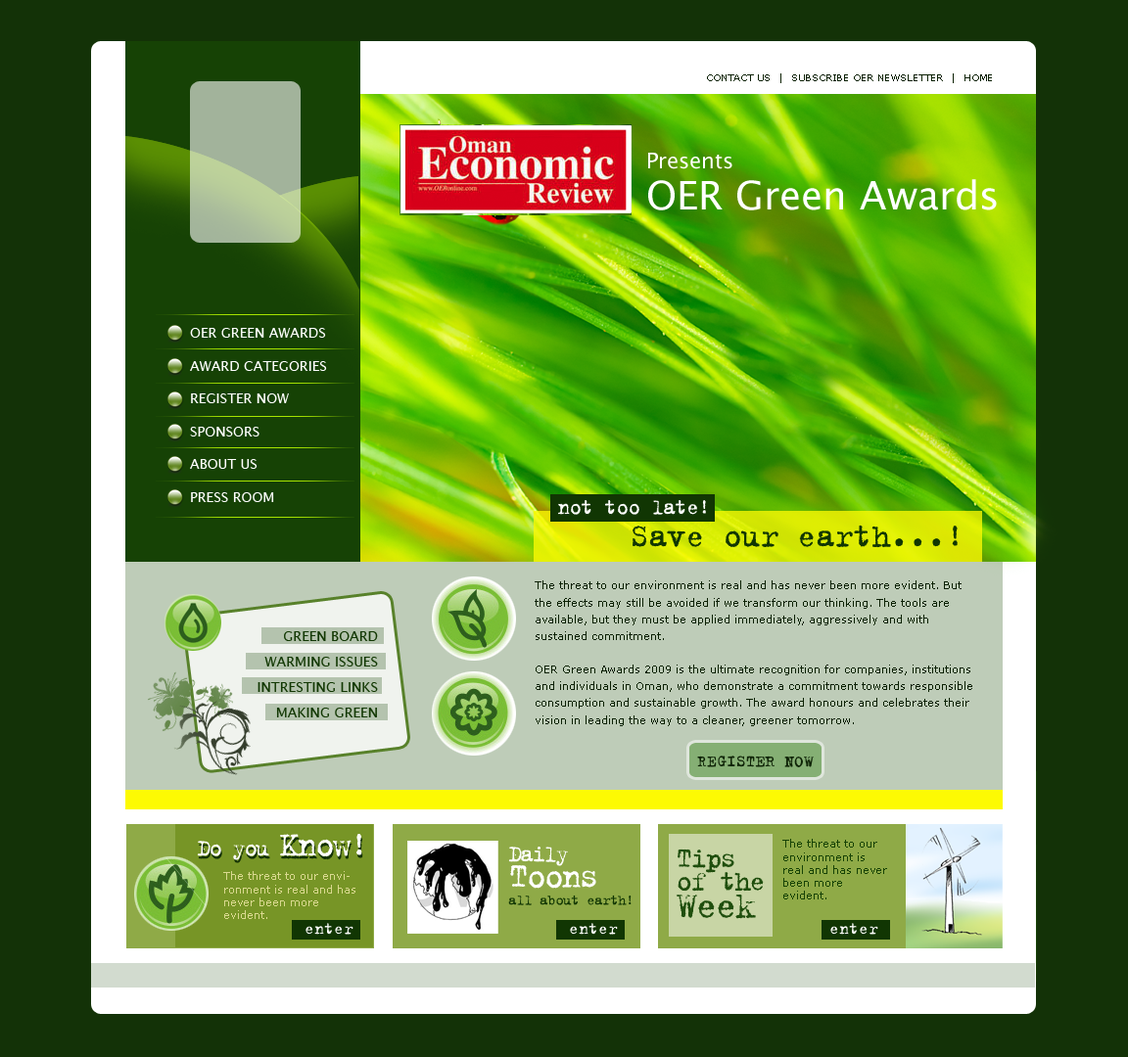
<style>
.page{position:relative;width:1128px;height:1057px;background:#133207}
.page>*{position:absolute;margin:0}
.t1{font:9.8px "Verdana";color:#0b2003}
.t2{font:39.2px/41.1px "LucidaSans";color:#ffffff}
.t3{font:21.5px/17.8px "LucidaSans";color:#ffffff}
.t4{font:13.7px "LucidaSans";color:#ffffff}
.t5{font:23.5px "Trixie-Plain";letter-spacing:-0.05em;color:#ffffff}
.t6{font:35.2px "Trixie-Plain";letter-spacing:-0.025em;color:#113603}
.t7{font:10.8px/16.8px "Verdana";color:#0b2003}
.t8{font:13.7px/25.5px "LucidaSans";color:#123803}
.t9{font:17.6px "Trixie-Plain";color:#0f2407}
.t10{font:25.5px "Trixie-Plain";letter-spacing:-0.075em;color:#ffffff}
.t11{font:37.2px "Trixie-Plain";letter-spacing:-0.075em;color:#ffffff}
.t12{font:10.8px "Verdana";color:#164205}
.t13{font:15.7px/17.8px "Trixie-Plain";letter-spacing:-0.075em;color:#113603}
.t14{font:25.5px/17.8px "Trixie-Plain";letter-spacing:-0.075em;color:#ffffff}
.t15{font:37.2px/25.6px "Trixie-Plain";letter-spacing:-0.075em;color:#ffffff}
.t16{font:30.3px/22.7px "Trixie-Plain";letter-spacing:-0.075em;color:#1f4e0d}
.t17{font:30.3px/17.8px "Trixie-Plain";letter-spacing:-0.075em;color:#1f4e0d}
.t18{font:41.1px/27.6px "Trixie-Plain";letter-spacing:-0.075em;color:#1f4e0d}
.t19{font:10.8px "Verdana";color:#dad990}
.t20{font:17.6px "Trixie-Plain";color:#ffffff}
</style>
<div class="page">
<p class="t1" style="left:707px;top:73px;width:285px;height:10px">CONTACT US  |  SUBSCRIBE OER NEWSLETTER  |  HOME</p>
<p class="t2" style="left:648px;top:153px;width:349px;height:57px"><span class="t3">Presents<br></span>OER Green Awards</p>
<p class="t4" style="left:190px;top:328px;width:137px;height:174px">OER GREEN AWARDS<br><br>AWARD CATEGORIES<br><br>REGISTER NOW<br><br>SPONSORS<br><br>ABOUT US<br><br>PRESS ROOM</p>
<p class="t5" style="left:558px;top:500px;width:148px;height:15px">not too late!</p>
<p class="t6" style="left:632px;top:525px;width:325px;height:23px">Save our earth...!</p>
<p class="t7" style="left:535px;top:581px;width:437px;height:145px">The threat to our environment is real and has never been more evident. But the effects may still be avoided if we transform our thinking. The tools are available, but they must be applied immediately, aggressively and with sustained commitment. <br><br>OER Green Awards 2009 is the ultimate recognition for companies, institutions and individuals in Oman, who demonstrate a commitment towards responsible consumption and sustainable growth. The award honours and celebrates their vision in leading the way to a cleaner, greener tomorrow.</p>
<p class="t8" style="left:257px;top:631px;width:121px;height:87px;text-align:right">GREEN BOARD<br>WARMING ISSUES<br>INTRESTING LINKS<br>MAKING GREEN</p>
<p class="t9" style="left:697px;top:756px;width:117px;height:12px">REGISTER NOW</p>
<p class="t10" style="left:197px;top:834px;width:165px;height:27px">Do you <span class="t11">Know!</span></p>
<p class="t12" style="left:782px;top:839px;width:105px;height:61px">The threat to our environment is real and has never been more evident.</p>
<p class="t13" style="left:508px;top:847px;width:123px;height:59px"><span class="t14">Daily<br></span><span class="t15">Toons<br></span>all about earth!</p>
<p class="t16" style="left:676px;top:849px;width:88px;height:70px"><span class="t17">Tips<br></span>of the<br><span class="t18">Week</span></p>
<p class="t19" style="left:223px;top:871px;width:132px;height:48px">The threat to our environment is real and has never been more evident.</p>
<p class="t20" style="left:305px;top:923px;width:48px;height:12px">enter</p>
<p class="t20" style="left:570px;top:923px;width:48px;height:12px">enter</p>
<p class="t20" style="left:830px;top:923px;width:48px;height:12px">enter</p>
</div>
